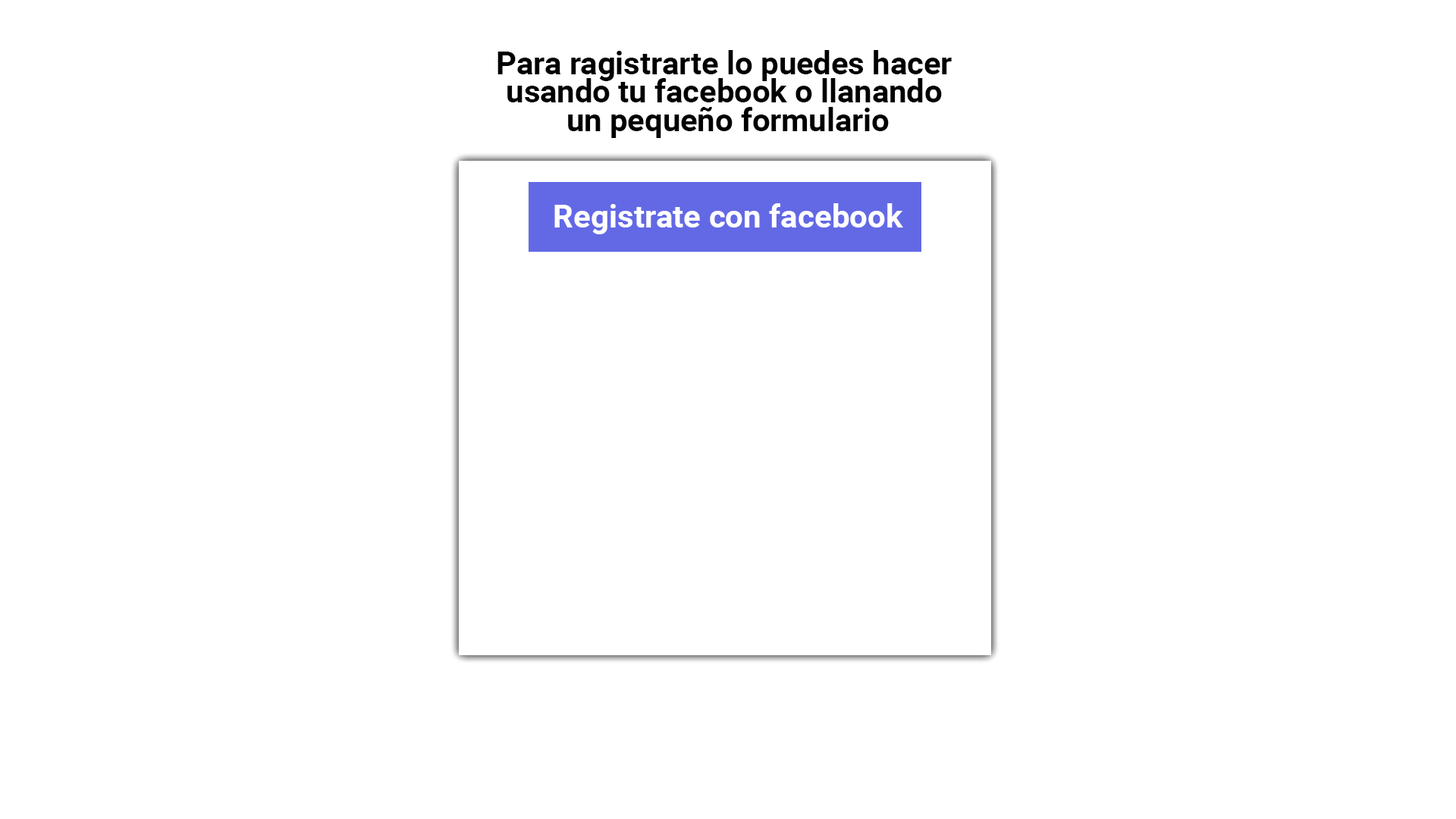
<style>
.page{position:relative;width:1456px;height:819px;background:#ffffff}
.page>*{position:absolute;margin:0}
.t1{font:31.6px/28.4px "Roboto-Bold";color:#000000}
.t2{font:31.9px "Roboto-Bold";color:#ffffff}
</style>
<div class="page">
<p class="t1" style="left:497px;top:50px;width:455px;height:88px;text-align:center">Para ragistrarte lo puedes hacer <br>usando tu facebook o llanando <br>un pequeño formulario</p>
<p class="t2" style="left:554px;top:203px;width:349px;height:31px">Registrate con facebook</p>
</div>
